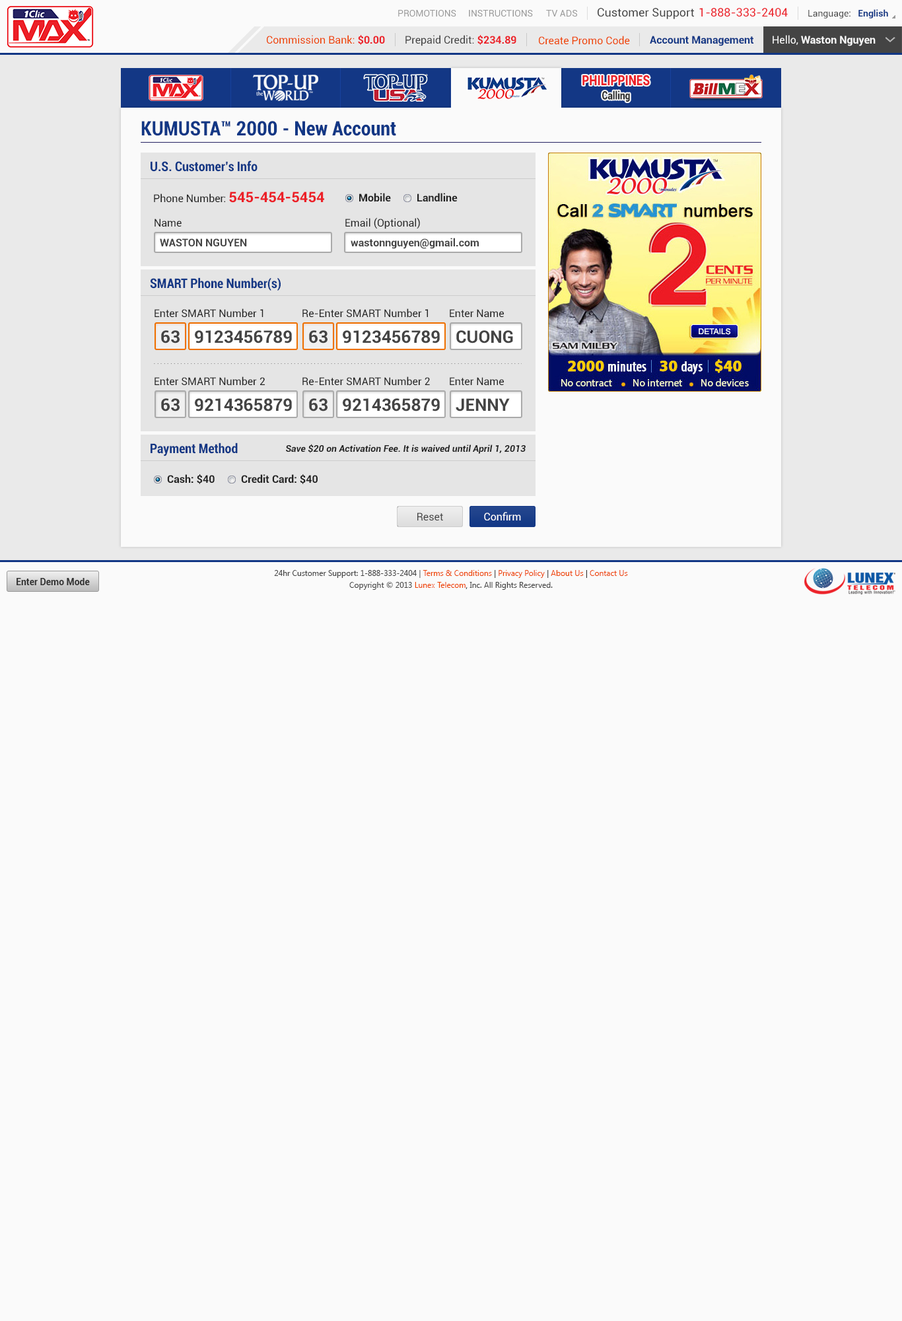
<style>
.page{position:relative;width:902px;height:1321px;background:#fafafa}
.page>*{position:absolute;margin:0}
.t1{font:9.2px "Roboto-Regular";color:#999999}
.t2{font:11.6px "Roboto-Regular";color:#444444}
.t3{font:11.6px "Roboto-Regular";color:#ec2029}
.t4{font:9.2px "Roboto-Regular";color:#444444}
.t5{font:9.2px "Roboto-Bold";color:#123785}
.t6{font:10.6px "Roboto-Regular";color:#ee4400}
.t7{font:10.6px "Roboto-Bold";color:#ec2028}
.t8{font:10.6px "Roboto-Regular";color:#444444}
.t9{font:10.6px "Roboto-Bold";color:#123785}
.t10{font:10.6px "Roboto-Bold";color:#fafafa}
.t11{font:10.6px "Roboto-Regular";color:#fafafa}
.t12{font:14.1px "Roboto-Black";color:#ec2028;scale:0.81 1}
.t13{font:11.3px "Roboto-Black";color:#333333;scale:0.81 1}
.t14{font:19.8px "Roboto-BoldCondensed";color:#123785}
.t15{font:13.2px "Roboto-BoldCondensed";color:#133785}
.t16{font:10.6px "Roboto-Regular";color:#222222}
.t17{font:14.5px "Roboto-Bold";color:#ec2028}
.t18{font:10.6px "Roboto-Bold";color:#222222}
.t19{font:10.6px "Roboto-Bold";color:#444444}
.t20{font:17.2px "Roboto-Bold";color:#444444}
.t21{font:9.2px "Roboto-BoldItalic";color:#222222}
.t22{font:10.6px "Roboto-Regular";color:#ffffff}
.t23{font:9.2px "Roboto-Bold";color:#333333}
.t24{font:7.9px/11.9px "SegoeUI";color:#444444}
.t25{font:7.9px/11.9px "SegoeUI";color:#ee4400}
.t26{font:7.9px/11.9px "SegoeUI";color:#333333}
</style>
<div class="page">
<p class="t1" style="left:398px;top:10px;width:59px;height:7px">PROMOTIONS</p>
<p class="t1" style="left:469px;top:10px;width:64px;height:7px">INSTRUCTIONS</p>
<p class="t1" style="left:546px;top:10px;width:31px;height:7px">TV ADS</p>
<p class="t2" style="left:598px;top:8px;width:96px;height:11px">Customer Support</p>
<p class="t3" style="left:700px;top:8px;width:88px;height:9px">1-888-333-2404</p>
<p class="t4" style="left:809px;top:9px;width:80px;height:9px">Language:   <span class="t5">English</span></p>
<p class="t6" style="left:267px;top:35px;width:118px;height:10px">Commission Bank: <span class="t7">$0.00</span></p>
<p class="t8" style="left:406px;top:35px;width:111px;height:11px">Prepaid Credit: <span class="t7">$234.89</span></p>
<p class="t6" style="left:539px;top:36px;width:91px;height:9px">Create Promo Code</p>
<p class="t9" style="left:650px;top:36px;width:104px;height:10px">Account Management</p>
<p class="t10" style="left:773px;top:35px;width:103px;height:11px"><span class="t11">Hello, </span>Waston Nguyen</p>
<p class="t12" style="left:583px;top:75px;width:67px;height:11px">PHILIPPINES</p>
<p class="t13" style="left:603px;top:91px;width:27px;height:11px">Calling</p>
<p class="t14" style="left:141px;top:121px;width:255px;height:15px">KUMUSTA™ 2000 - New Account</p>
<p class="t15" style="left:151px;top:161px;width:107px;height:11px">U.S. Customer’s Info</p>
<p class="t16" style="left:154px;top:192px;width:170px;height:11px">Phone Number: <span class="t17">545-454-5454</span></p>
<p class="t18" style="left:359px;top:193px;width:32px;height:9px">Mobile</p>
<p class="t18" style="left:418px;top:193px;width:40px;height:9px">Landline</p>
<p class="t16" style="left:155px;top:219px;width:27px;height:8px">Name</p>
<p class="t16" style="left:346px;top:217px;width:74px;height:12px">Email (Optional)</p>
<p class="t19" style="left:160px;top:238px;width:87px;height:8px">WASTON NGUYEN</p>
<p class="t19" style="left:351px;top:238px;width:128px;height:11px">wastonnguyen@gmail.com</p>
<p class="t15" style="left:150px;top:277px;width:131px;height:14px">SMART Phone Number(s)</p>
<p class="t16" style="left:155px;top:309px;width:109px;height:9px">Enter SMART Number 1</p>
<p class="t16" style="left:303px;top:309px;width:125px;height:9px">Re-Enter SMART Number 1</p>
<p class="t16" style="left:450px;top:309px;width:54px;height:9px">Enter Name</p>
<p class="t20" style="left:161px;top:330px;width:19px;height:14px">63</p>
<p class="t20" style="left:195px;top:330px;width:97px;height:14px">9123456789</p>
<p class="t20" style="left:309px;top:330px;width:19px;height:14px">63</p>
<p class="t20" style="left:343px;top:330px;width:97px;height:14px">9123456789</p>
<p class="t20" style="left:457px;top:330px;width:56px;height:14px">CUONG</p>
<p class="t16" style="left:155px;top:377px;width:110px;height:9px">Enter SMART Number 2</p>
<p class="t16" style="left:303px;top:377px;width:127px;height:9px">Re-Enter SMART Number 2</p>
<p class="t16" style="left:450px;top:377px;width:54px;height:9px">Enter Name</p>
<p class="t20" style="left:161px;top:398px;width:19px;height:14px">63</p>
<p class="t20" style="left:195px;top:398px;width:97px;height:14px">9214365879</p>
<p class="t20" style="left:309px;top:398px;width:19px;height:14px">63</p>
<p class="t20" style="left:343px;top:398px;width:97px;height:14px">9214365879</p>
<p class="t20" style="left:456px;top:398px;width:54px;height:14px">JENNY</p>
<p class="t15" style="left:151px;top:443px;width:87px;height:14px">Payment Method</p>
<p class="t21" style="left:286px;top:444px;width:240px;height:10px">Save $20 on Activation Fee. It is waived until April 1, 2013</p>
<p class="t18" style="left:167px;top:474px;width:48px;height:10px">Cash: $40</p>
<p class="t18" style="left:241px;top:474px;width:77px;height:10px">Credit Card: $40</p>
<p class="t8" style="left:418px;top:513px;width:25px;height:8px">Reset</p>
<p class="t22" style="left:484px;top:512px;width:37px;height:9px">Confirm</p>
<p class="t23" style="left:17px;top:578px;width:73px;height:7px">Enter Demo Mode</p>
<p class="t24" style="left:274px;top:570px;width:354px;height:20px;text-align:center">24hr Customer Support: 1-888-333-2404 | <span class="t25">Terms &amp; Conditions</span><span class="t26"> | </span><span class="t25">Privacy Policy</span><span class="t26"> | </span><span class="t25">About Us</span><span class="t26"> | </span><span class="t25">Contact Us<br></span>Copyright © 2013 <span class="t25">Lunex Telecom</span><span class="t26">,</span> Inc. All Rights Reserved.</p>
</div>
